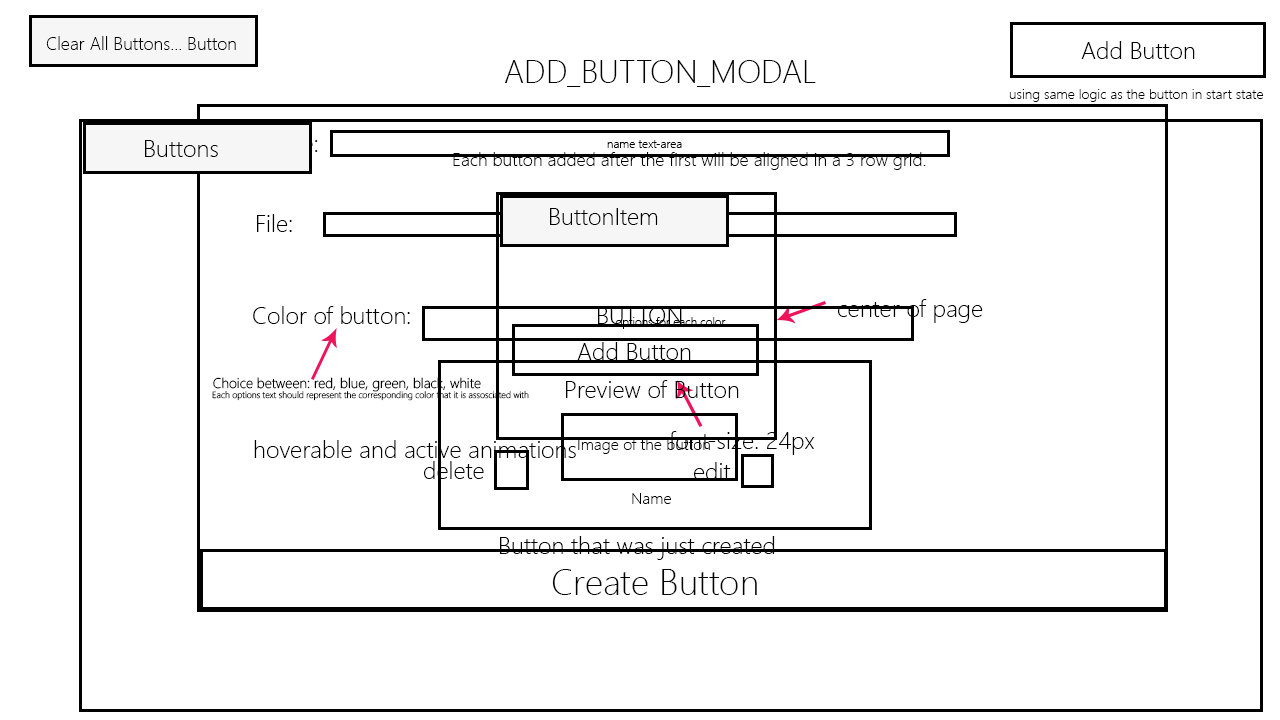
<style>
.page{position:relative;width:1280px;height:720px;background:#ffffff}
.page>*{position:absolute;margin:0}
.t1{font:18px "SegoeUI-Light";color:#000000}
.t2{font:24px "SegoeUI-Light";color:#000000}
.t3{font:32px "SegoeUI-Light";color:#000000}
.t4{font:14px "SegoeUI-Light";color:#000000}
.t5{font:12px "SegoeUI-Light";color:#000000}
.t6{font:9px "SegoeUI-Light";color:#000000}
.t7{font:16px "SegoeUI-Light";color:#000000}
.t8{font:36px "SegoeUI-Light";color:#000000}
</style>
<div class="page">
<p class="t1" style="left:46px;top:36px;width:190px;height:14px">Clear All Buttons... Button</p>
<p class="t2" style="left:1081px;top:41px;width:114px;height:18px">Add Button</p>
<p class="t3" style="left:505px;top:60px;width:311px;height:27px">ADD_BUTTON_MODAL</p>
<p class="t4" style="left:1009px;top:89px;width:255px;height:13px">using same logic as the button in start state</p>
<p class="t2" style="left:145px;top:140px;width:73px;height:17px">Buttons</p>
<p class="t5" style="left:607px;top:140px;width:75px;height:8px">name text-area</p>
<p class="t1" style="left:453px;top:152px;width:473px;height:18px">Each button added after the first will be aligned in a 3 row grid.</p>
<p class="t2" style="left:550px;top:208px;width:108px;height:17px">ButtonItem</p>
<p class="t2" style="left:257px;top:214px;width:35px;height:18px">File:</p>
<p class="t2" style="left:838px;top:299px;width:145px;height:24px">center of page</p>
<p class="t2" style="left:253px;top:306px;width:157px;height:18px">Color of button:</p>
<p class="t2" style="left:598px;top:307px;width:84px;height:17px">BUTTON</p>
<p class="t5" style="left:615px;top:317px;width:111px;height:12px">options for each color</p>
<p class="t2" style="left:577px;top:342px;width:114px;height:18px">Add Button</p>
<p class="t4" style="left:213px;top:377px;width:268px;height:15px">Choice between: red, blue, green, black, white</p>
<p class="t2" style="left:566px;top:380px;width:173px;height:18px">Preview of Button</p>
<p class="t6" style="left:212px;top:391px;width:317px;height:10px">Each options text should represent the corresponding color that it is assosciated with</p>
<p class="t7" style="left:578px;top:438px;width:132px;height:16px">Image of the button</p>
<p class="t2" style="left:669px;top:431px;width:146px;height:24px">font-size: 24px</p>
<p class="t2" style="left:254px;top:440px;width:322px;height:18px">hoverable and active animations</p>
<p class="t2" style="left:424px;top:461px;width:60px;height:18px">delete</p>
<p class="t2" style="left:694px;top:462px;width:37px;height:18px">edit</p>
<p class="t7" style="left:632px;top:493px;width:39px;height:11px">Name</p>
<p class="t2" style="left:500px;top:536px;width:275px;height:24px">Button that was just created</p>
<p class="t8" style="left:552px;top:569px;width:205px;height:26px">Create Button</p>
</div>
